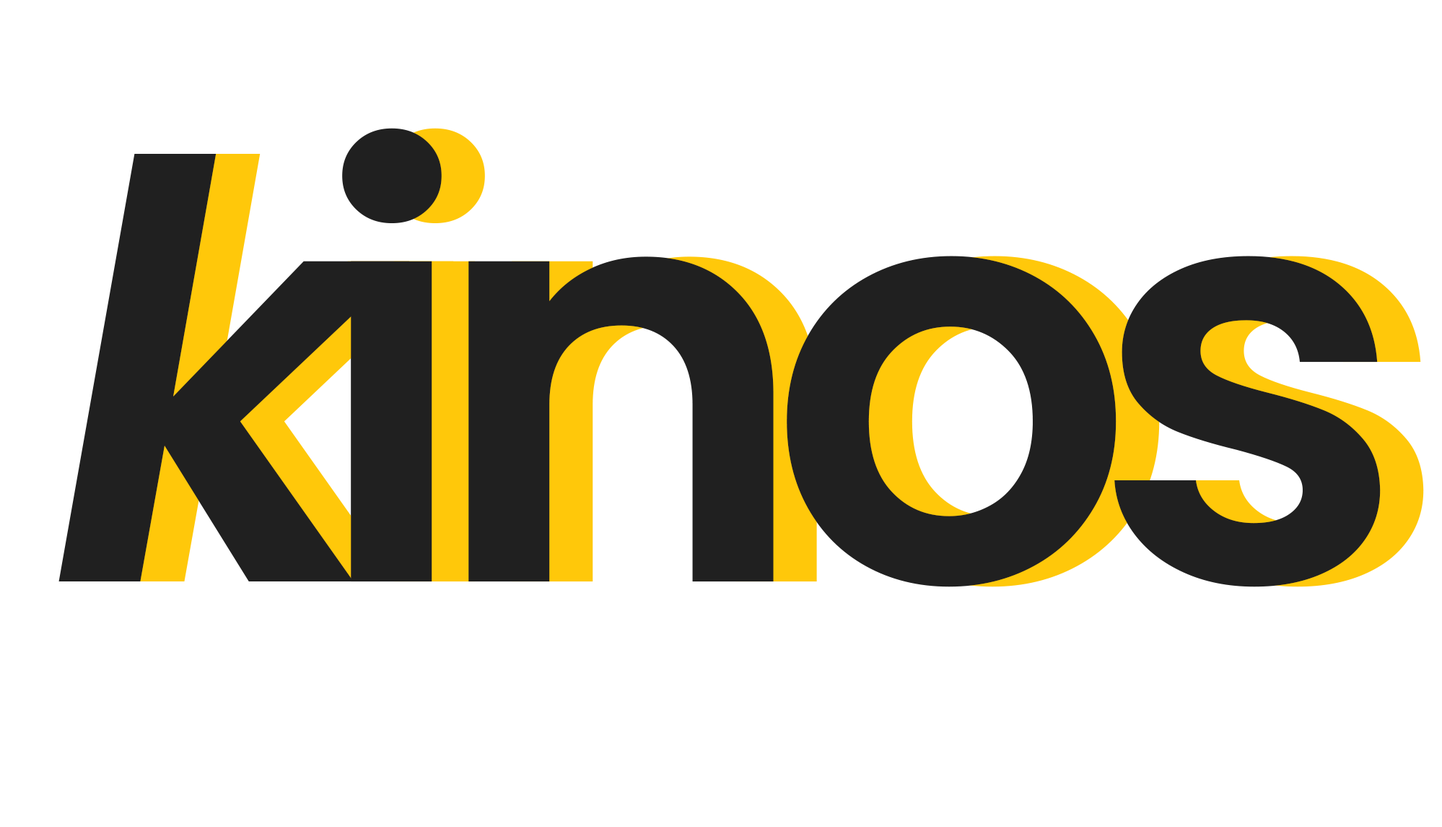
<style>
.page{position:relative;width:1442px;height:827px;background:#ffffff}
.page>*{position:absolute;margin:0}
.t1{font:577.6px "Poppins-SemiBold";letter-spacing:-0.075em;color:#202020}
.t2{font:577.6px "Poppins-SemiBoldItalic";letter-spacing:-0.075em;color:#202020}
</style>
<div class="page">
<p class="t1" style="left:342px;top:128px;width:1039px;height:459px">inos</p>
<p class="t2" style="left:58px;top:154px;width:352px;height:427px">k</p>
</div>
